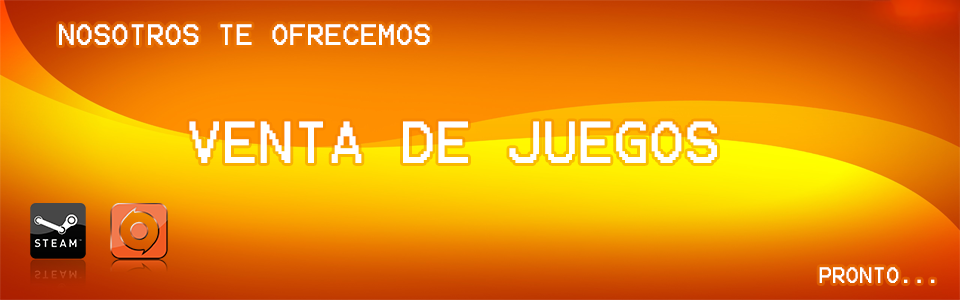
<style>
.page{position:relative;width:960px;height:300px}
.page>*{position:absolute;margin:0}
.t1{font:23.7px "Terminal";color:#ffffff;text-transform:uppercase}
.t2{font:47.4px "Terminal";color:#ffffff;text-transform:uppercase}
.t3{font:18px "Terminal";color:#ffffff;text-transform:uppercase}
</style>
<div class="page">
<p class="t1" style="left:59px;top:24px;width:371px;height:21px">Nosotros te ofrecemos</p>
<p class="t2" style="left:189px;top:121px;width:528px;height:42px">Venta de juegos</p>
<p class="t3" style="left:819px;top:267px;width:116px;height:16px">Pronto...</p>
</div>
